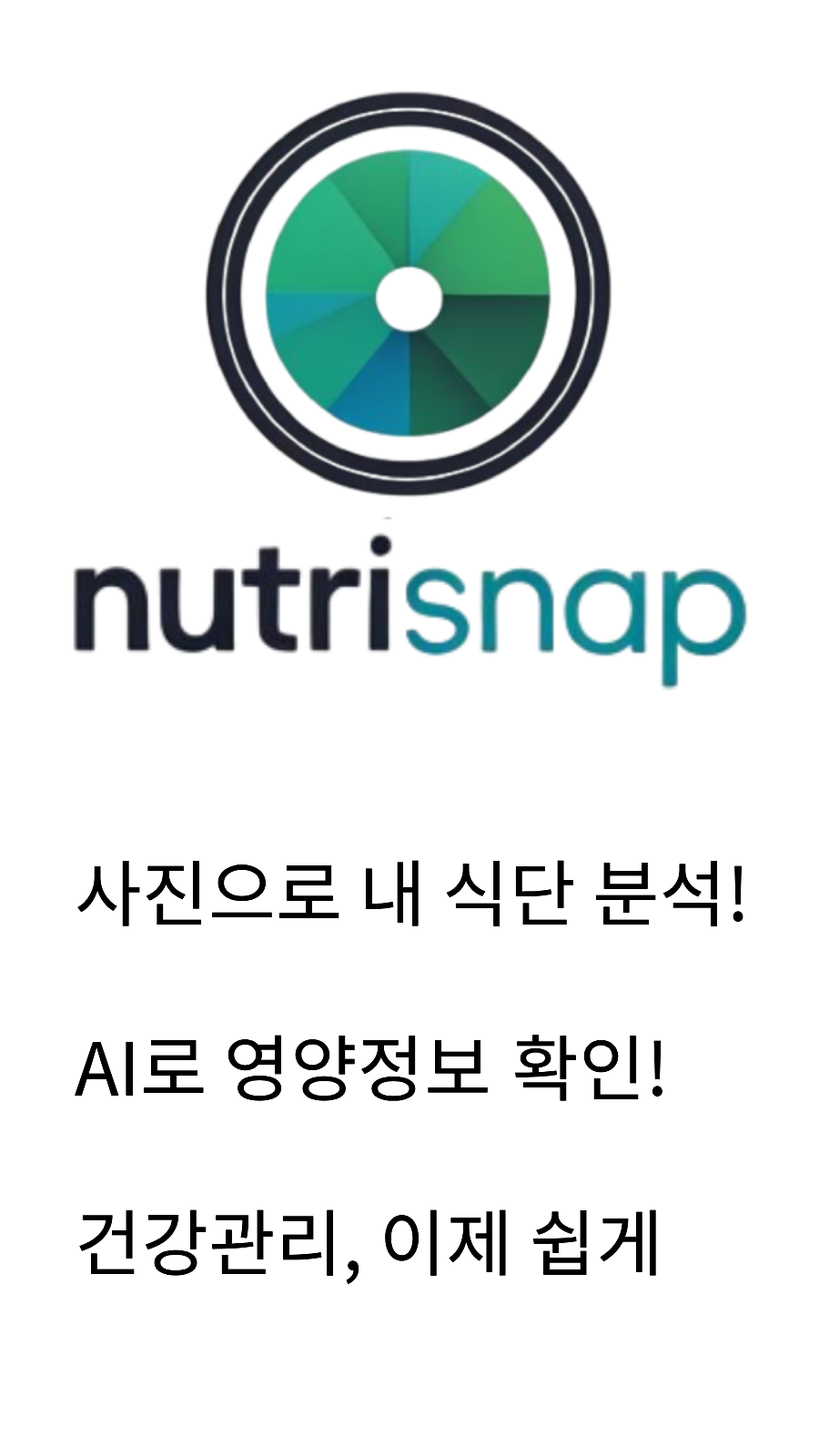
<style>
.page{position:relative;width:819px;height:1456px;background:#ffffff}
.page>*{position:absolute;margin:0}
.t1{font:72.8px "NotoSansKR-Regular";color:#000000}
</style>
<div class="page">
<p class="t1" style="left:75px;top:860px;width:668px;height:424px">사진으로 내 식단 분석!<br><br>AI로 영양정보 확인!<br><br>건강관리, 이제 쉽게</p>
</div>
